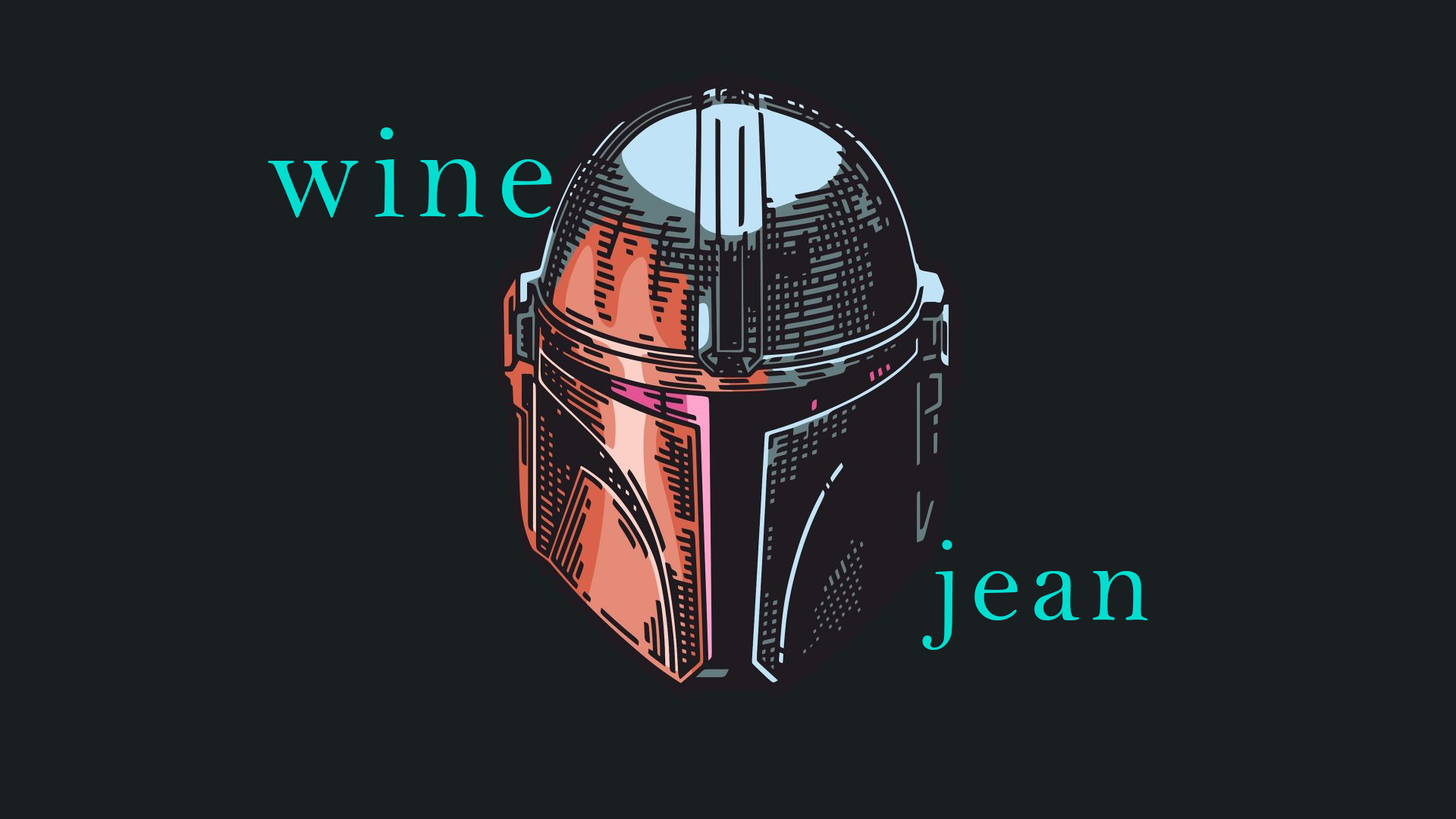
<style>
.page{position:relative;width:1456px;height:819px;background:#191e21}
.page>*{position:absolute;margin:0}
.t1{font:135.2px "BellMT";letter-spacing:0.07em;color:#03ded1}
.t2{font:117.1px "BellMT";letter-spacing:0.07em;color:#03ded1}
</style>
<div class="page">
<p class="t1" style="left:268px;top:127px;width:284px;height:91px">wine</p>
<p class="t2" style="left:922px;top:540px;width:226px;height:110px">jean</p>
</div>
